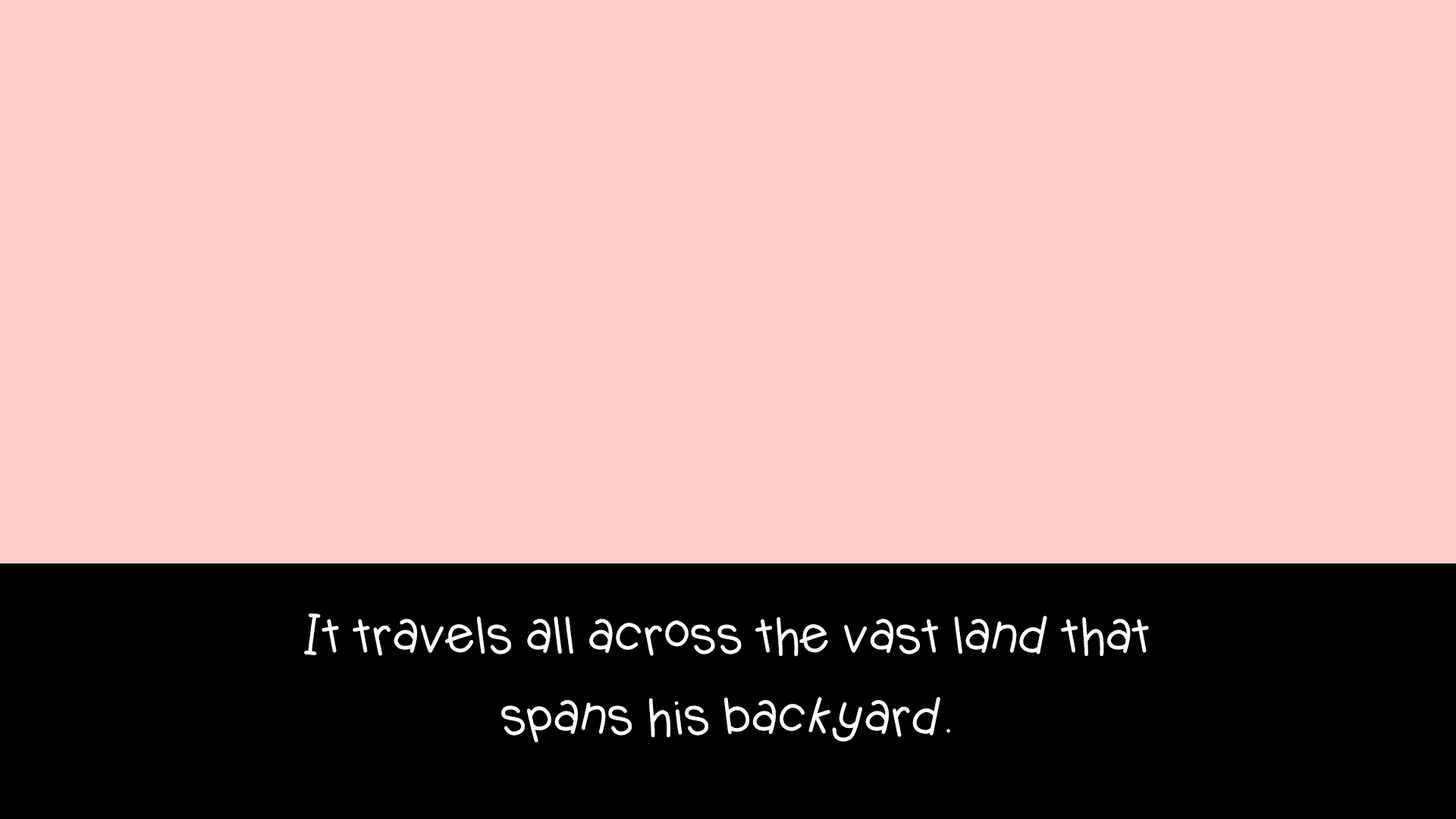
<style>
.page{position:relative;width:1456px;height:819px;background:#ffcbcb}
.page>*{position:absolute;margin:0}
.t1{font:49.1px/81.1px "KBJellybean";letter-spacing:-0.04em;color:#ffffff}
</style>
<div class="page">
<p class="t1" style="left:304px;top:613px;width:845px;height:129px;text-align:center">It travels all across the vast land that <br>spans his backyard.</p>
</div>
